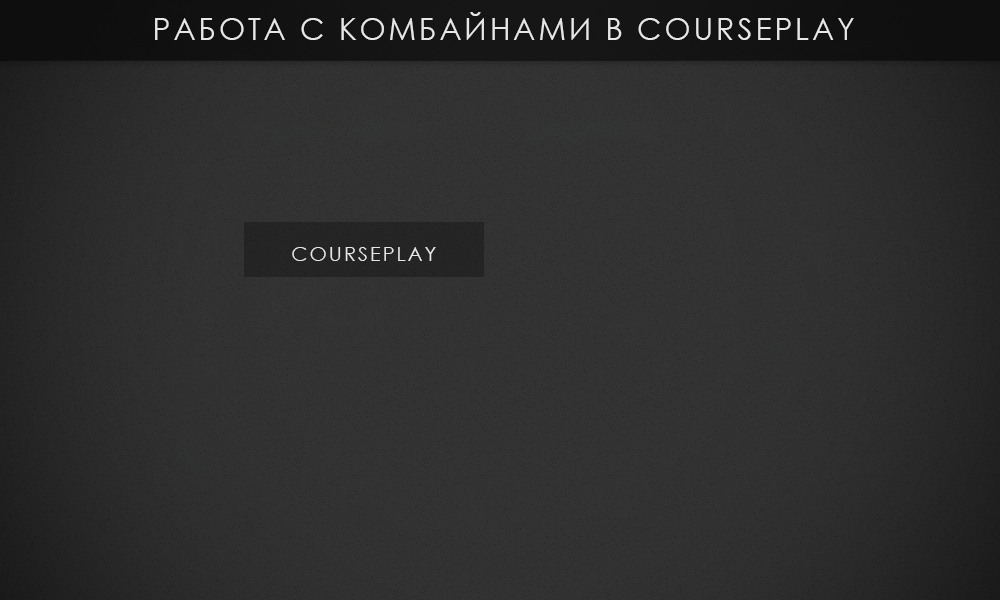
<style>
.page{position:relative;width:1000px;height:600px}
.page>*{position:absolute;margin:0}
.t1{font:30px "CenturyGothic";letter-spacing:0.1em;color:#e7e7e7}
.t2{font:20px "CenturyGothic";letter-spacing:0.1em;color:#e7e7e7}
</style>
<div class="page">
<p class="t1" style="left:155px;top:12px;width:699px;height:28px">РАБОТА С КОМБАЙНАМИ В COURSEPLAY</p>
<p class="t2" style="left:292px;top:247px;width:144px;height:14px">COURSEPLAY</p>
</div>
